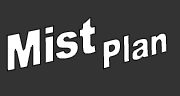
<style>
.page{position:relative;width:180px;height:96px;background:#333333}
.page>*{position:absolute;margin:0}
.t1{font:48.2px "Arial-Black";letter-spacing:-0.05em;color:#ffffff;font-weight:bold;font-style:italic;scale:0.86 1}
.t2{font:36.2px "Arial-Black";letter-spacing:-0.05em;color:#ffffff;font-weight:bold;font-style:italic;scale:0.83 1}
</style>
<div class="page">
<p class="t1" style="left:6px;top:17px;width:91px;height:55px;rotate:-12deg">Mist</p>
<p class="t2" style="left:102px;top:32px;width:66px;height:38px;rotate:-15deg">Plan</p>
</div>
